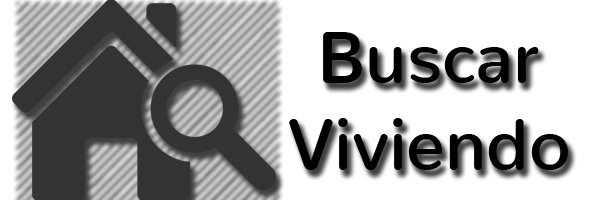
<style>
.page{position:relative;width:600px;height:200px;background:#ffffff}
.page>*{position:absolute;margin:0}
.t1{font:72px "Nunito-SemiBold";color:#000000}
</style>
<div class="page">
<p class="t1" style="left:289px;top:32px;width:279px;height:138px;text-align:center">Buscar<br>Viviendo</p>
</div>
